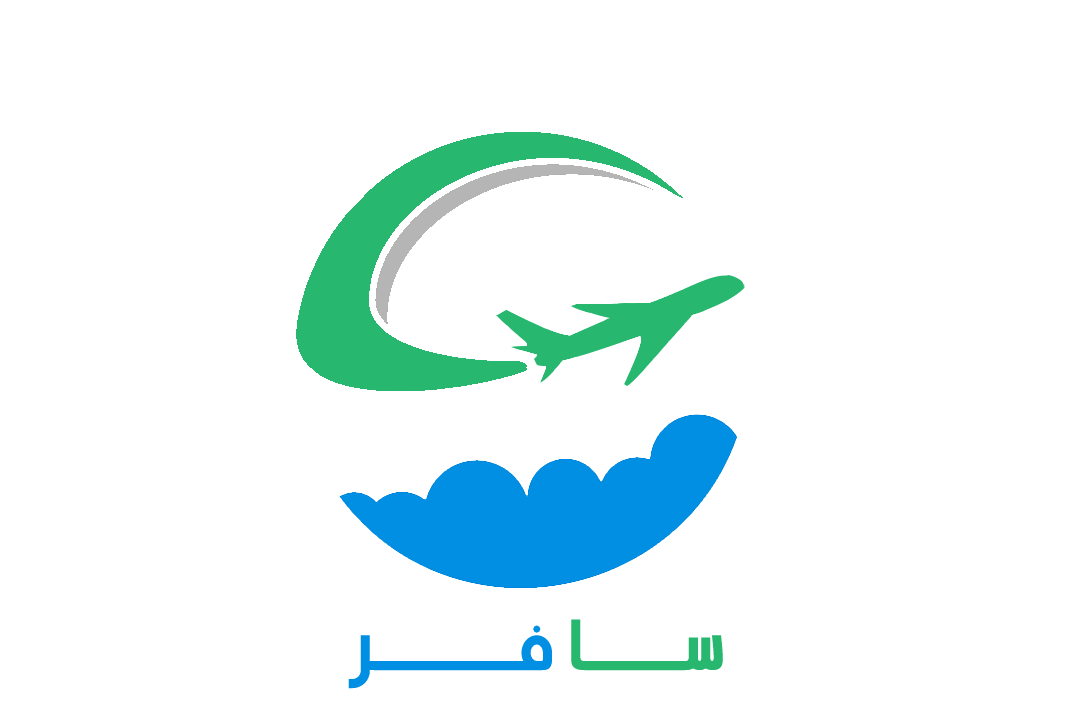
<style>
.page{position:relative;width:1082px;height:720px;background:#ffffff}
.page>*{position:absolute;margin:0}
.t1{font:72px "HSIshraq-Bold";color:#018fe3}
.t2{font:72px "HSIshraq-Bold";color:#28b76f}
</style>
<div class="page">
<p class="t1" style="left:348px;top:619px;width:375px;height:70px"><span class="t2">ســـــــا </span>فــــــــــر</p>
</div>
